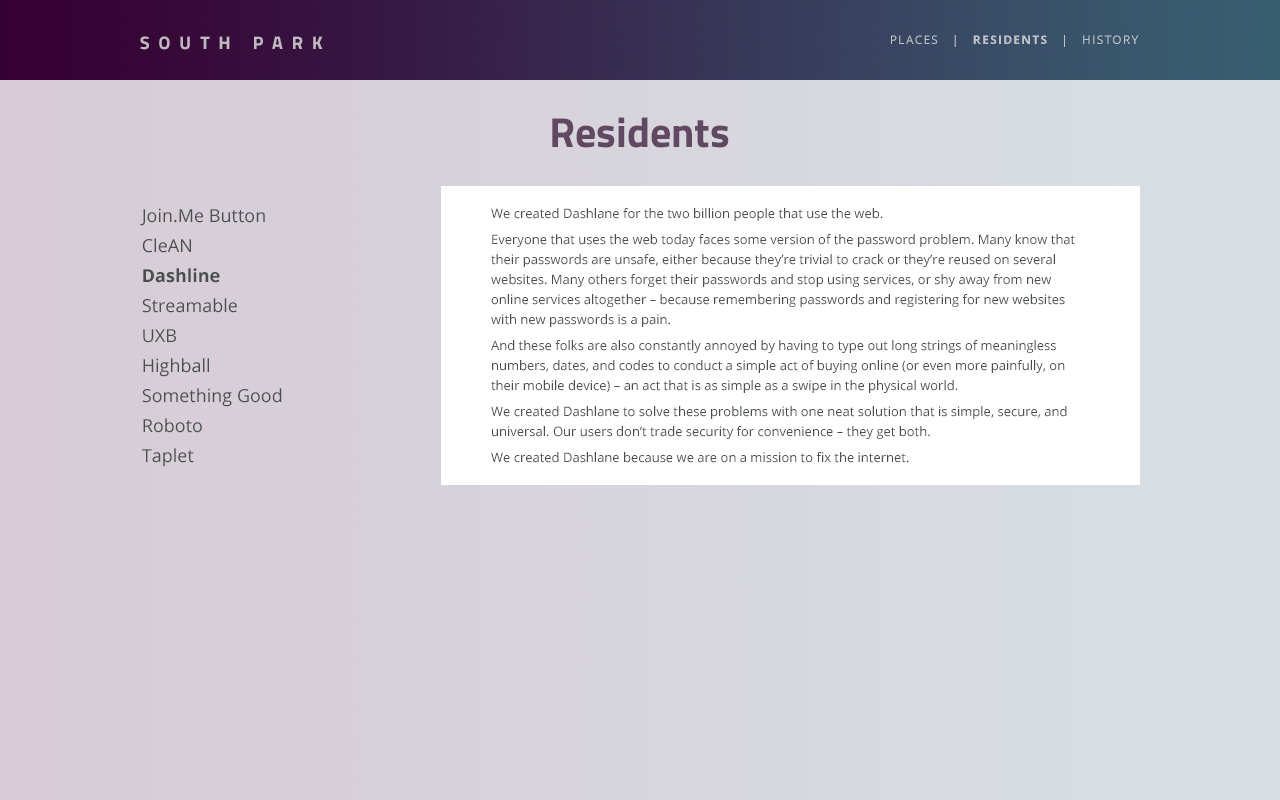
<style>
.page{position:relative;width:1280px;height:800px}
.page>*{position:absolute;margin:0}
.t1{font:18px "Titillium-Bold";letter-spacing:0.5em;color:#bfb8c0;text-transform:uppercase}
.t2{font:12px "OpenSans";letter-spacing:0.1em;color:#c0c4ca;text-transform:uppercase}
.t3{font:12px "OpenSans-Bold";letter-spacing:0.1em;color:#c0c4ca;text-transform:uppercase}
.t4{font:42px "Titillium-Bold";color:#624862}
.t5{font:18px/30px "OpenSans";color:#494e51}
.t6{font:18px/30px "OpenSans-Bold";color:#494e51}
.t7{font:13px/20px "OpenSans";color:#494e51}
</style>
<div class="page">
<p class="t1" style="left:140px;top:36px;width:183px;height:14px">south park</p>
<p class="t2" style="left:891px;top:35px;width:248px;height:12px">places   |   <span class="t3">residents   </span>|   history</p>
<p class="t4" style="left:552px;top:117px;width:177px;height:31px">Residents</p>
<p class="t5" style="left:140px;top:208px;width:142px;height:259px">Join.Me Button<br>CleAN<br><span class="t6">Dashline<br></span>Streamable<br>UXB<br>Highball<br>Something Good<br>Roboto<br>Taplet</p>
<p class="t7" style="left:491px;top:208px;width:584px;height:255px">We created Dashlane for the two billion people that use the web.<br>Everyone that uses the web today faces some version of the password problem. Many know that their passwords are unsafe, either because they’re trivial to crack or they’re reused on several websites. Many others forget their passwords and stop using services, or shy away from new online services altogether – because remembering passwords and registering for new websites with new passwords is a pain.<br>And these folks are also constantly annoyed by having to type out long strings of meaningless numbers, dates, and codes to conduct a simple act of buying online (or even more painfully, on their mobile device) – an act that is as simple as a swipe in the physical world.<br>We created Dashlane to solve these problems with one neat solution that is simple, secure, and universal. Our users don’t trade security for convenience – they get both.<br>We created Dashlane because we are on a mission to fix the internet.</p>
</div>
